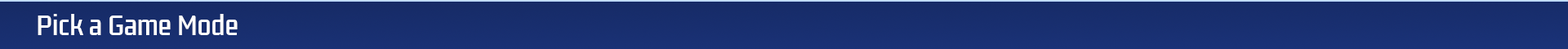
<style>
.page{position:relative;width:1568px;height:49px}
.page>*{position:absolute;margin:0}
.t1{font:24.5px "KdamThmorPro-Regular";color:#ffffff}
</style>
<div class="page">
<p class="t1" style="left:38px;top:14px;width:200px;height:21px">Pick a Game Mode</p>
</div>
